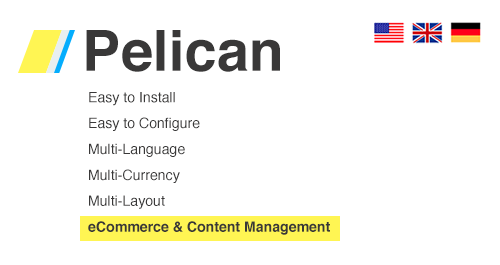
<style>
.page{position:relative;width:500px;height:265px;background:#ffffff}
.page>*{position:absolute;margin:0}
.t1{font:56.6px "Helvetica-Bold";color:#393838}
.t2{font:14.2px/25.9px "Helvetica";color:#393838}
.t3{font:14.2px/25.9px "Helvetica-Bold";color:#393838}
</style>
<div class="page">
<p class="t1" style="left:86px;top:30px;width:194px;height:42px">Pelican</p>
<p class="t2" style="left:88px;top:92px;width:242px;height:143px">Easy to Install<br>Easy to Configure<br>Multi-Language<br>Multi-Currency<br>Multi-Layout<br><span class="t3">eCommerce &amp; Content Management</span></p>
</div>
